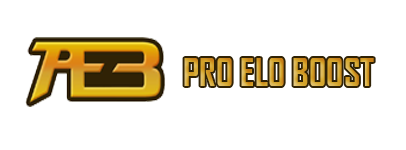
<style>
.page{position:relative;width:406px;height:150px;background:#ffffff}
.page>*{position:absolute;margin:0}
.t1{font:36px "AgencyFB-Bold";color:#d4a62c}
</style>
<div class="page">
<p class="t1" style="left:184px;top:58px;width:190px;height:28px">PRO ELO BOOST</p>
</div>
